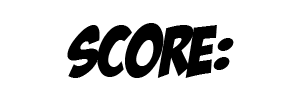
<style>
.page{position:relative;width:300px;height:100px;background:#ffffff}
.page>*{position:absolute;margin:0}
.t1{font:70.6px "BadaBoomBB";color:#000000}
</style>
<div class="page">
<p class="t1" style="left:67px;top:23px;width:167px;height:55px">:Score</p>
</div>
